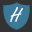
<style>
.page{position:relative;width:32px;height:32px;background:#333333}
.page>*{position:absolute;margin:0}
.t1{font:20.8px "FreestyleScript-Regular";color:#ffffff}
</style>
<div class="page">
<p class="t1" style="left:10px;top:7px;width:13px;height:15px">H</p>
</div>
